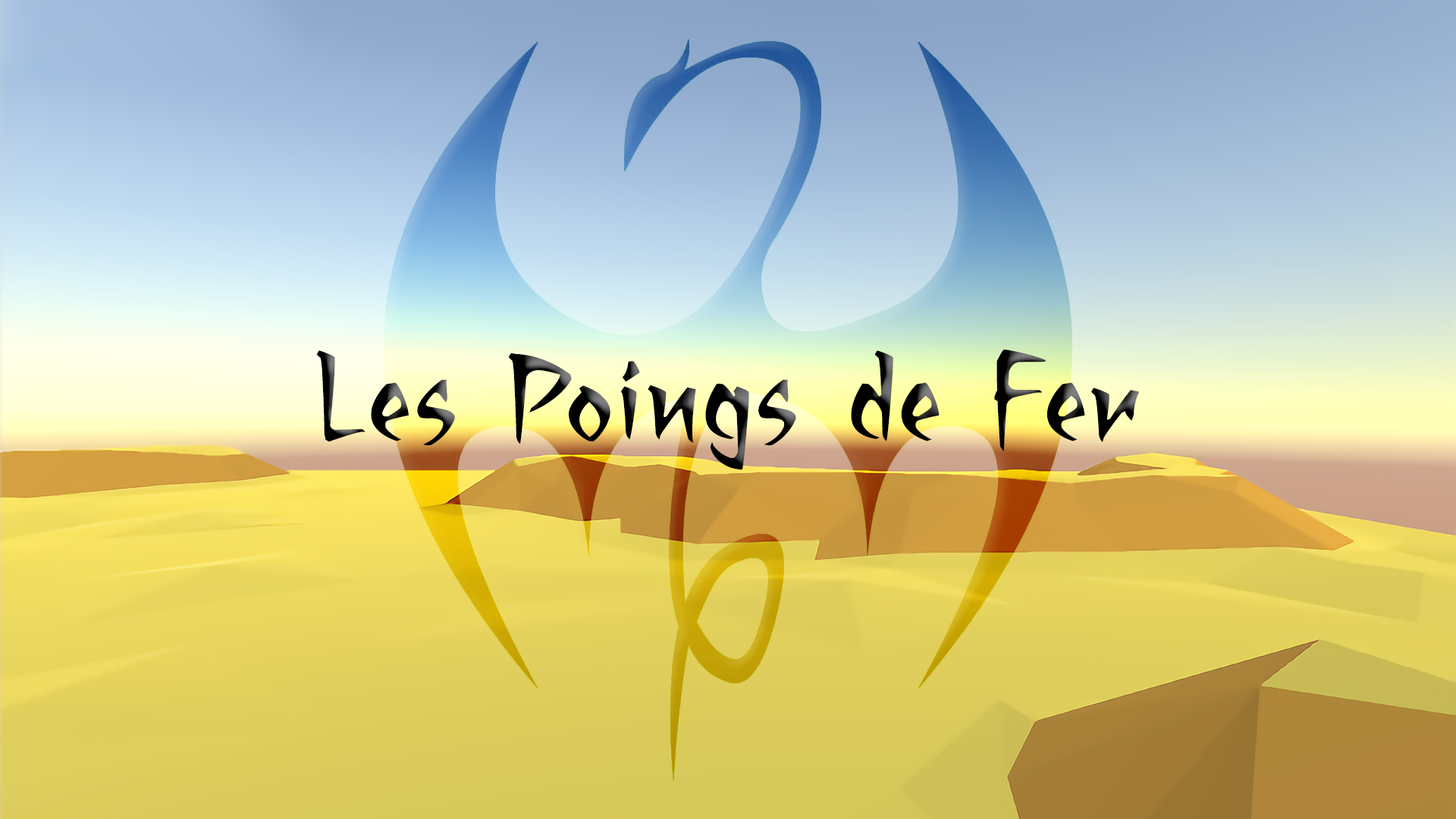
<style>
.page{position:relative;width:1456px;height:819px}
.page>*{position:absolute;margin:0}
.t1{font:158px "RagingRedLotusBB";color:#000000}
</style>
<div class="page">
<p class="t1" style="left:316px;top:350px;width:823px;height:120px">Les Poings de Fer</p>
</div>
